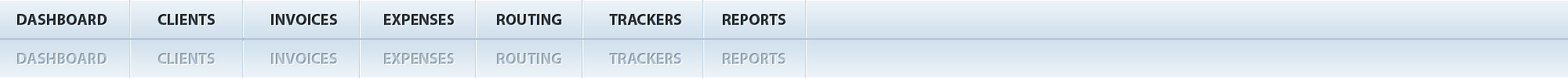
<style>
.page{position:relative;width:1568px;height:78px}
.page>*{position:absolute;margin:0}
.t1{font:15.7px "MyriadPro-Bold";color:#2c3a46}
.t2{font:15.7px "MyriadPro-Bold";color:#b1c3d2}
</style>
<div class="page">
<p class="t1" style="left:17px;top:14px;width:769px;height:11px">DASHBOARD  CLIENTS  INVOICES  EXPENSES  ROUTING  TRACKERS  REPORTS</p>
<p class="t2" style="left:17px;top:53px;width:769px;height:11px">DASHBOARD  CLIENTS  INVOICES  EXPENSES  ROUTING  TRACKERS  REPORTS</p>
</div>
